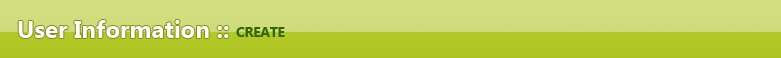
<style>
.page{position:relative;width:781px;height:58px}
.page>*{position:absolute;margin:0}
.t1{font:24px "SegoeUI-Bold";color:#fefefe}
.t2{font:14px "SegoeUI-Bold";letter-spacing:-0.025em;color:#336600}
</style>
<div class="page">
<p class="t1" style="left:18px;top:20px;width:211px;height:18px">User Information ::</p>
<p class="t2" style="left:236px;top:27px;width:49px;height:10px">CREATE</p>
</div>
